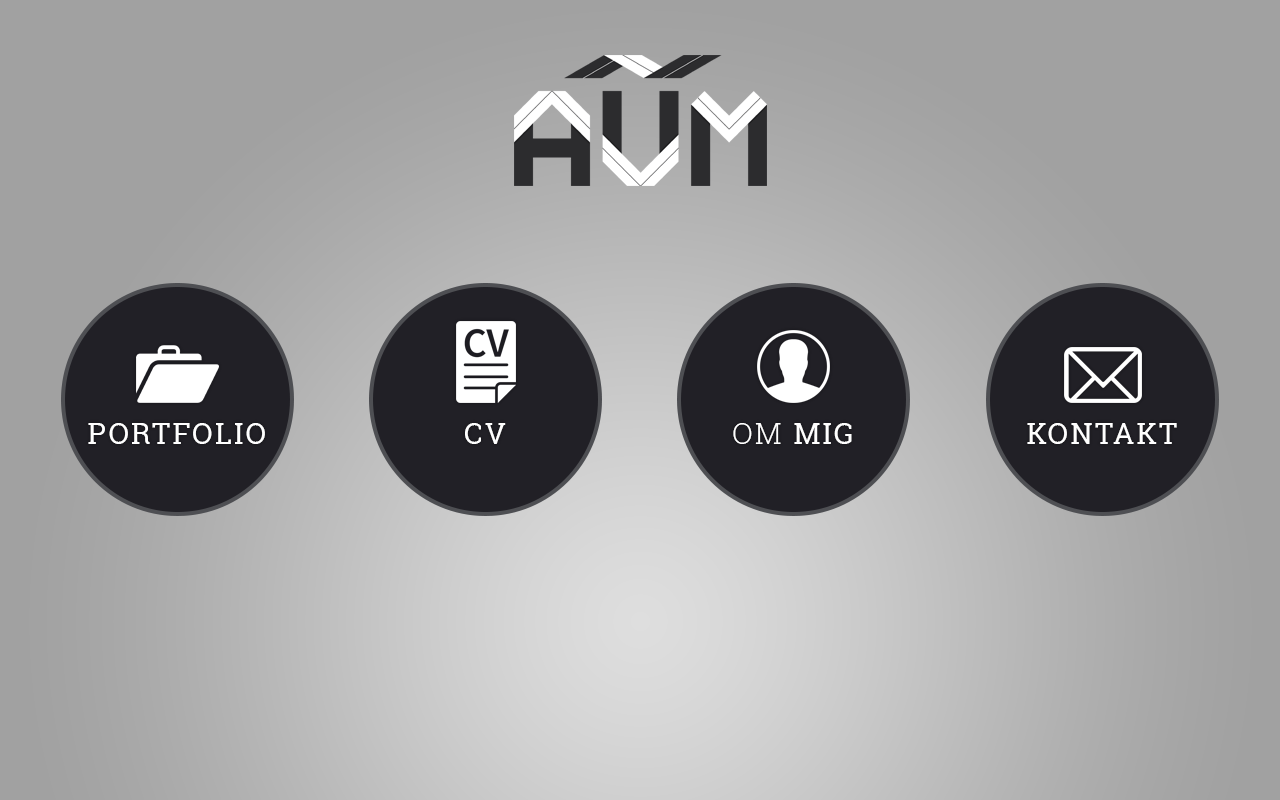
<style>
.page{position:relative;width:1280px;height:800px;background:#a1a1a1}
.page>*{position:absolute;margin:0}
.t1{font:29.2px "RobotoSlab-Regular";letter-spacing:0.075em;color:#ffffff}
.t2{font:29.2px "RobotoSlab-Light";letter-spacing:0.075em;color:#ffffff}
</style>
<div class="page">
<p class="t1" style="left:88px;top:423px;width:177px;height:21px">PORTFOLIO</p>
<p class="t1" style="left:465px;top:423px;width:41px;height:21px">CV</p>
<p class="t1" style="left:733px;top:423px;width:119px;height:21px"><span class="t2">OM</span> MIG</p>
<p class="t1" style="left:1027px;top:423px;width:150px;height:21px">KONTAKT</p>
</div>
